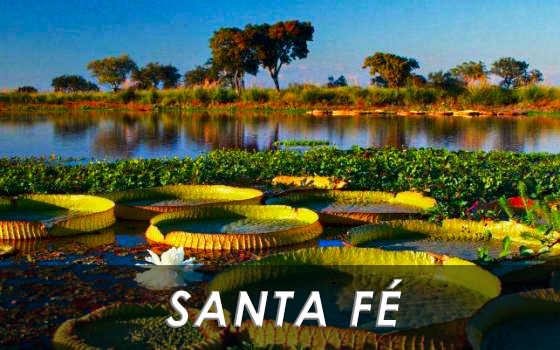
<style>
.page{position:relative;width:560px;height:350px}
.page>*{position:absolute;margin:0}
.t1{font:48.8px "CenturyGothic-Bold";letter-spacing:0.05em;color:#ffffff;font-style:italic}
</style>
<div class="page">
<p class="t1" style="left:165px;top:279px;width:238px;height:49px">SANTA FÉ</p>
</div>
